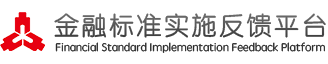
<style>
.page{position:relative;width:328px;height:64px;background:#ffffff}
.page>*{position:absolute;margin:0}
.t1{font:25px "STYuanti-SC-Regular";letter-spacing:0.1em;color:#575757}
.t2{font:11.2px "STYuanti-SC-Regular";color:#2b2b2b}
</style>
<div class="page">
<p class="t1" style="left:54px;top:13px;width:272px;height:25px">金融标准实施反馈平台</p>
<p class="t2" style="left:55px;top:42px;width:270px;height:11px">Financial Standard Implementation Feedback Platform</p>
</div>
